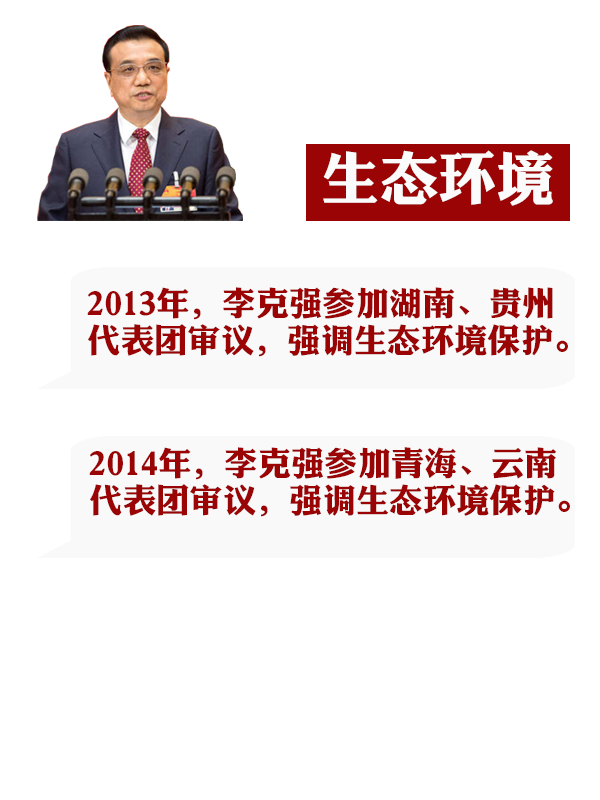
<style>
.page{position:relative;width:600px;height:800px;background:#ffffff}
.page>*{position:absolute;margin:0}
.t1{font:58.3px "DFLiJinHeiW8";color:#fbfbfb}
.t2{font:33.3px/37.5px "DFLiJinHeiW8";color:#9a0404}
</style>
<div class="page">
<p class="t1" style="left:323px;top:150px;width:230px;height:56px">生态环境</p>
<p class="t2" style="left:87px;top:287px;width:481px;height:70px">2013年，李克强参加湖南、贵州<br>代表团审议，强调生态环境保护。</p>
<p class="t2" style="left:89px;top:447px;width:481px;height:70px">2014年，李克强参加青海、云南<br>代表团审议，强调生态环境保护。</p>
</div>
